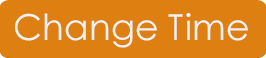
<style>
.page{position:relative;width:266px;height:58px;background:#dd8011}
.page>*{position:absolute;margin:0}
.t1{font:36px "CenturyGothic";color:#f2f2f2}
</style>
<div class="page">
<p class="t1" style="left:15px;top:13px;width:233px;height:35px">Change Time</p>
</div>
